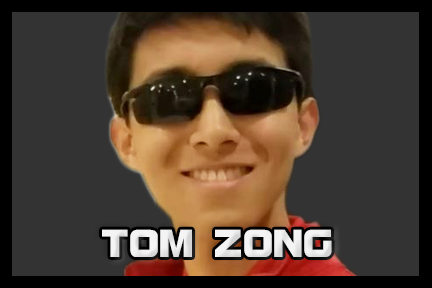
<style>
.page{position:relative;width:432px;height:288px;background:#333333}
.page>*{position:absolute;margin:0}
.t1{font:41.7px "BolsterBold";color:#f3f3f3}
</style>
<div class="page">
<p class="t1" style="left:102px;top:229px;width:230px;height:28px">TOM ZONG</p>
</div>
